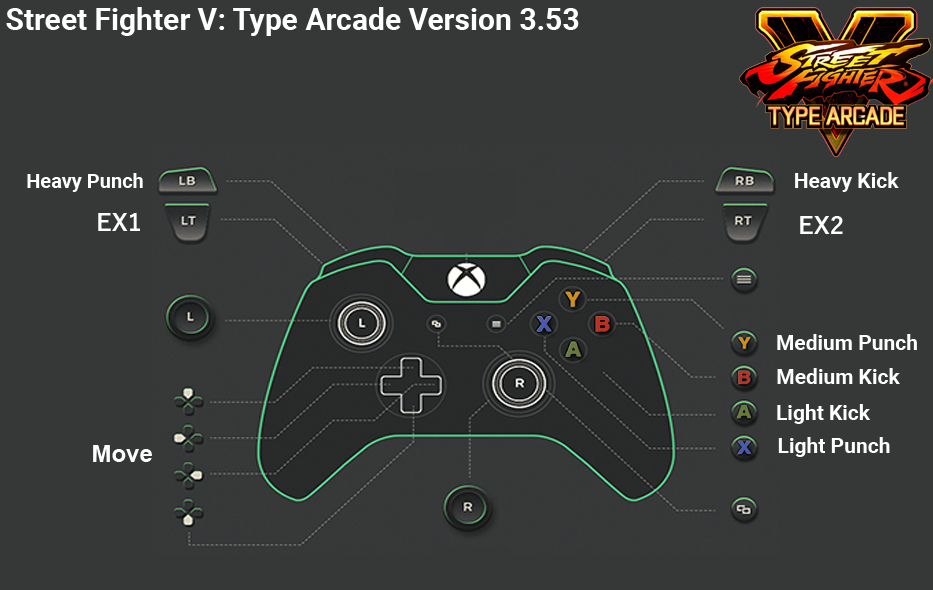
<style>
.page{position:relative;width:933px;height:590px;background:#363838}
.page>*{position:absolute;margin:0}
.t1{font:30px "Roboto-Bold";color:#ffffff}
.t2{font:20px "Roboto-Bold";color:#ffffff}
.t3{font:21px "Roboto-Bold";color:#ffffff}
.t4{font:24px "YuGothic-Bold";color:#ffffff}
.t5{font:24px "Arial-BoldMT";color:#fefefe}
</style>
<div class="page">
<p class="t1" style="left:6px;top:7px;width:573px;height:29px">Street Fighter V: Type Arcade Version 3.53</p>
<p class="t2" style="left:27px;top:173px;width:116px;height:19px">Heavy Punch</p>
<p class="t3" style="left:795px;top:172px;width:104px;height:20px">Heavy Kick</p>
<p class="t4" style="left:98px;top:213px;width:42px;height:18px">EX1</p>
<p class="t4" style="left:800px;top:216px;width:43px;height:18px">EX2</p>
<p class="t3" style="left:777px;top:334px;width:140px;height:16px">Medium Punch</p>
<p class="t3" style="left:777px;top:368px;width:123px;height:16px">Medium Kick</p>
<p class="t3" style="left:777px;top:404px;width:94px;height:20px">Light Kick</p>
<p class="t3" style="left:778px;top:437px;width:112px;height:20px">Light Punch</p>
<p class="t5" style="left:93px;top:445px;width:59px;height:17px">Move</p>
</div>
